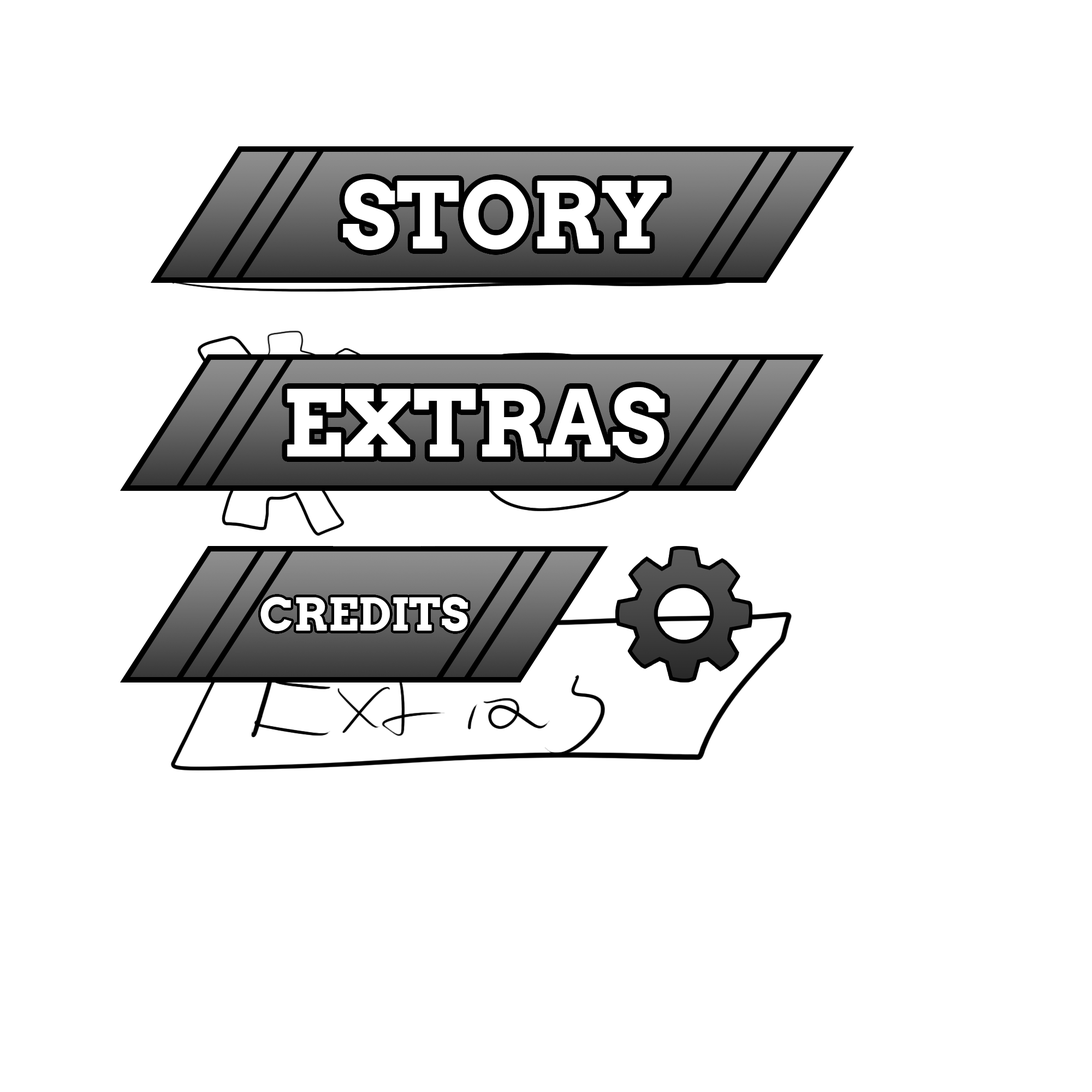
<style>
.page{position:relative;width:1092px;height:1092px;background:#ffffff}
.page>*{position:absolute;margin:0}
.t1{font:91px "Arvo-Bold";color:#ffffff}
.t2{font:45.5px "Arvo-Bold";color:#ffffff}
</style>
<div class="page">
<p class="t1" style="left:343px;top:179px;width:324px;height:71px">STORY</p>
<p class="t1" style="left:343px;top:179px;width:324px;height:71px">STORY</p>
<p class="t1" style="left:287px;top:387px;width:378px;height:71px">EXTRAS</p>
<p class="t1" style="left:287px;top:387px;width:378px;height:71px">EXTRAS</p>
<p class="t2" style="left:260px;top:597px;width:208px;height:34px">CREDITS</p>
<p class="t2" style="left:260px;top:597px;width:208px;height:34px">CREDITS</p>
</div>
